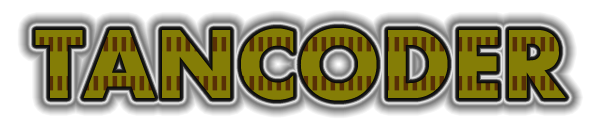
<style>
.page{position:relative;width:600px;height:128px;background:#ffffff}
.page>*{position:absolute;margin:0}
.t1{font:102px "Aharoni-Bold";color:#847d06}
</style>
<div class="page">
<p class="t1" style="left:35px;top:28px;width:531px;height:73px">TANCODER</p>
</div>
